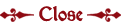
<style>
.page{position:relative;width:121px;height:28px;background:#ffffff}
.page>*{position:absolute;margin:0}
.t1{font:18px "Kelmscott-Regular";color:#8e0a12}
</style>
<div class="page">
<p class="t1" style="left:39px;top:6px;width:44px;height:16px">Close</p>
</div>
